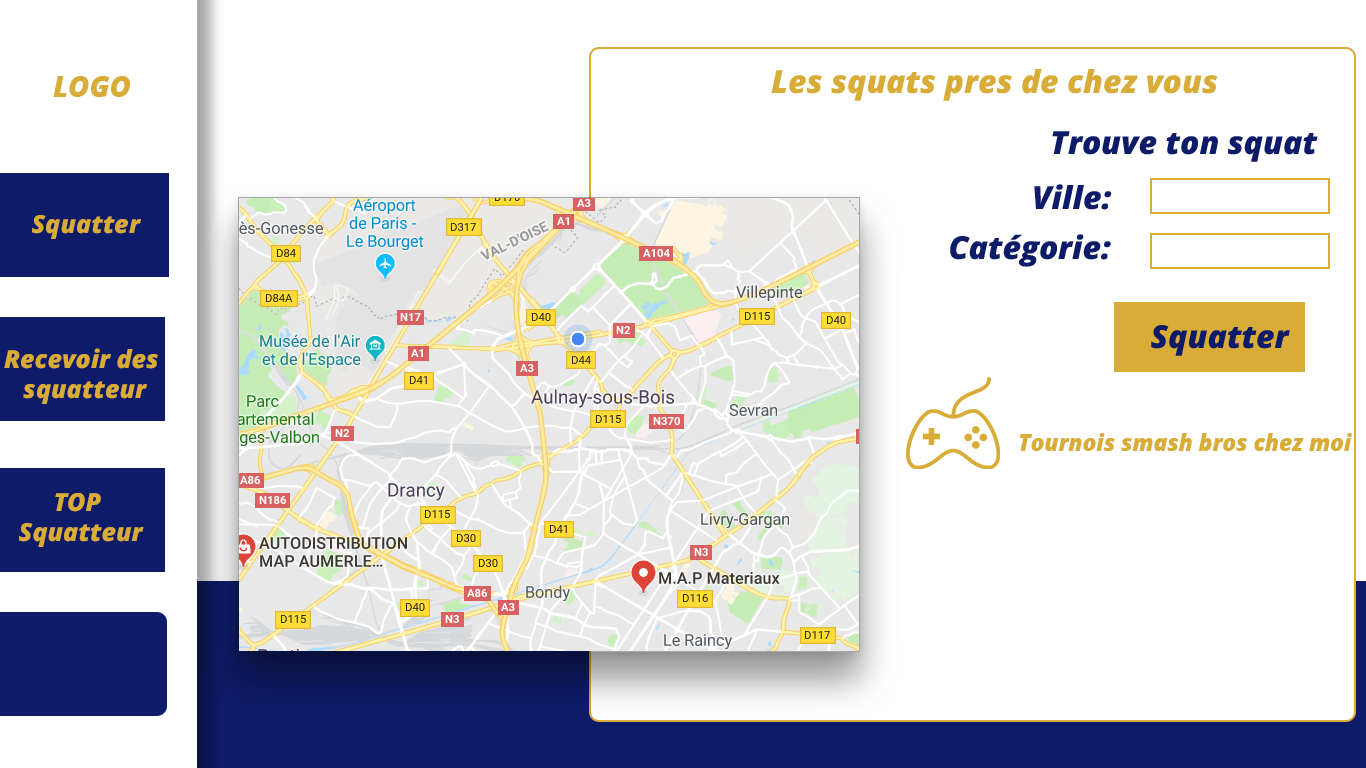
<style>
.page{position:relative;width:1366px;height:768px;background:#ffffff}
.page>*{position:absolute;margin:0}
.t1{font:28.9px "OpenSans-ExtraBoldItalic";color:#d9ab37}
.t2{font:31.8px "OpenSans-ExtraBoldItalic";color:#d9ab37}
.t3{font:31.8px "OpenSans-ExtraBoldItalic";color:#0e1b69}
.t4{font:25px "OpenSans-ExtraBoldItalic";color:#d9ab37}
.t5{font:22.7px "OpenSans-ExtraBoldItalic";color:#d9ab37}
</style>
<div class="page">
<p class="t1" style="left:53px;top:76px;width:77px;height:21px">LOGO</p>
<p class="t2" style="left:771px;top:69px;width:447px;height:32px">Les squats pres de chez vous</p>
<p class="t3" style="left:1052px;top:131px;width:266px;height:31px">Trouve ton squat</p>
<p class="t3" style="left:1034px;top:184px;width:78px;height:26px">Ville:</p>
<p class="t4" style="left:32px;top:215px;width:109px;height:24px">Squatter</p>
<p class="t3" style="left:950px;top:234px;width:161px;height:33px">Catégorie:</p>
<p class="t3" style="left:1151px;top:325px;width:139px;height:31px">Squatter</p>
<p class="t4" style="left:4px;top:348px;width:154px;height:56px;text-align:center">Recevoir des <br>squatteur</p>
<p class="t5" style="left:1019px;top:433px;width:333px;height:18px">Tournois smash bros chez moi</p>
<p class="t4" style="left:19px;top:492px;width:125px;height:55px;text-align:center">TOP <br>Squatteur</p>
</div>
